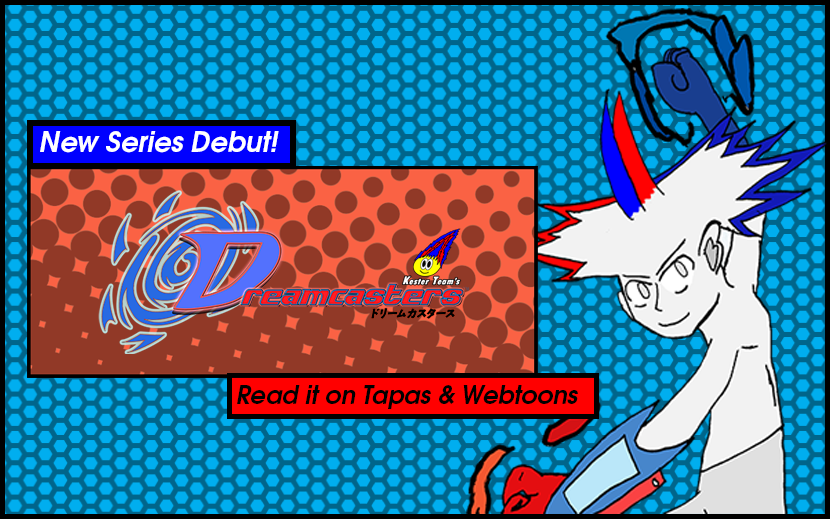
<style>
.page{position:relative;width:830px;height:519px}
.page>*{position:absolute;margin:0}
.t1{font:27.5px "TeXGyreAdventor-BoldItalic";color:#ffffff}
.t2{font:24.4px "TeXGyreAdventor-BoldItalic";color:#000000}
</style>
<div class="page">
<p class="t1" style="left:40px;top:131px;width:239px;height:22px">New Series Debut!</p>
<p class="t2" style="left:237px;top:385px;width:341px;height:24px">Read it on Tapas &amp; Webtoons</p>
</div>
